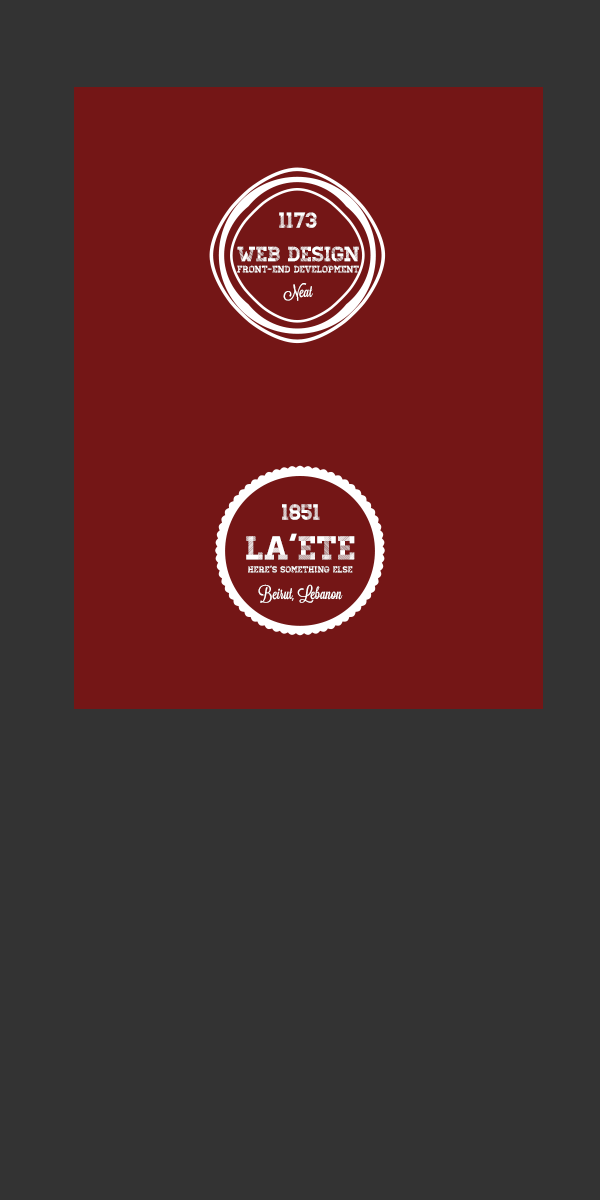
<style>
.page{position:relative;width:600px;height:1200px;background:#333333}
.page>*{position:absolute;margin:0}
.t1{font:21.8px "Homestead-Display";color:#ffffff}
.t2{font:20.8px "Homestead-Display";color:#ffffff}
.t3{font:9.5px "Homestead-Display";color:#ffffff}
.t4{font:15.8px "Lavanderia-Sturdy";color:#ffffff}
.t5{font:22px "Homestead-Display";color:#ffffff}
.t6{font:33.3px "Homestead-Display";color:#ffffff}
.t7{font:8.9px "Homestead-Display";color:#ffffff}
</style>
<div class="page">
<p class="t1" style="left:279px;top:212px;width:38px;height:16px">1173</p>
<p class="t2" style="left:237px;top:246px;width:122px;height:16px">Web Design</p>
<p class="t3" style="left:237px;top:265px;width:122px;height:8px">Front-End Development</p>
<p class="t4" style="left:283px;top:283px;width:30px;height:18px;rotate:-90deg">Neat</p>
<p class="t5" style="left:282px;top:504px;width:38px;height:16px">1851</p>
<p class="t6" style="left:246px;top:533px;width:109px;height:27px">La’ETE</p>
<p class="t7" style="left:248px;top:565px;width:105px;height:8px">here’S SOMETHING ELSE</p>
<p class="t4" style="left:258px;top:584px;width:85px;height:19px;rotate:-90deg">Beirut, Lebanon</p>
</div>
